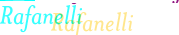
<style>
.page{position:relative;width:179px;height:35px;background:#ffffff}
.page>*{position:absolute;margin:0}
.t1{font:30px "MrsEavesItalic";color:#37ffff}
</style>
<div class="page">
<p class="t1" style="left:0px;top:5px;width:82px;height:28px">Rafanelli</p>
</div>
